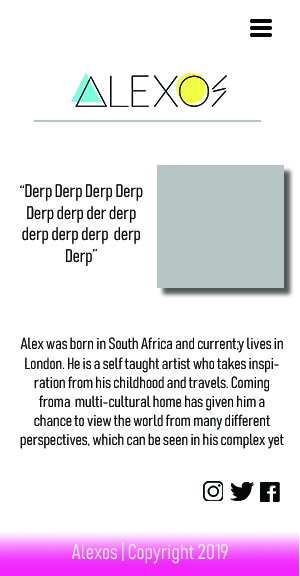
<style>
.page{position:relative;width:300px;height:576px;background:#ffffff}
.page>*{position:absolute;margin:0}
.t1{font:18px "Bahnschrift-LightCondensed";color:#090b0b}
.t2{font:16px "Bahnschrift-LightCondensed";color:#090b0b}
.t3{font:21.1px "Bahnschrift-LightCondensed";color:#e9e9e4}
</style>
<div class="page">
<p class="t1" style="left:20px;top:184px;width:123px;height:82px;text-align:center">“Derp Derp Derp Derp Derp derp der derp derp derp derp  derp Derp”</p>
<p class="t2" style="left:20px;top:337px;width:264px;height:112px;text-align:center">Alex was born in South Africa and current;y lives in London. He is a self taught artist who takes inspiration from his childhood and travels. Coming froma  multi-cultural home has given him a chance to view the world from many different perspectives, which can be seen in his complex yet clean art.</p>
<p class="t3" style="left:71px;top:542px;width:157px;height:22px">Alexos | Copyright 2019</p>
</div>
